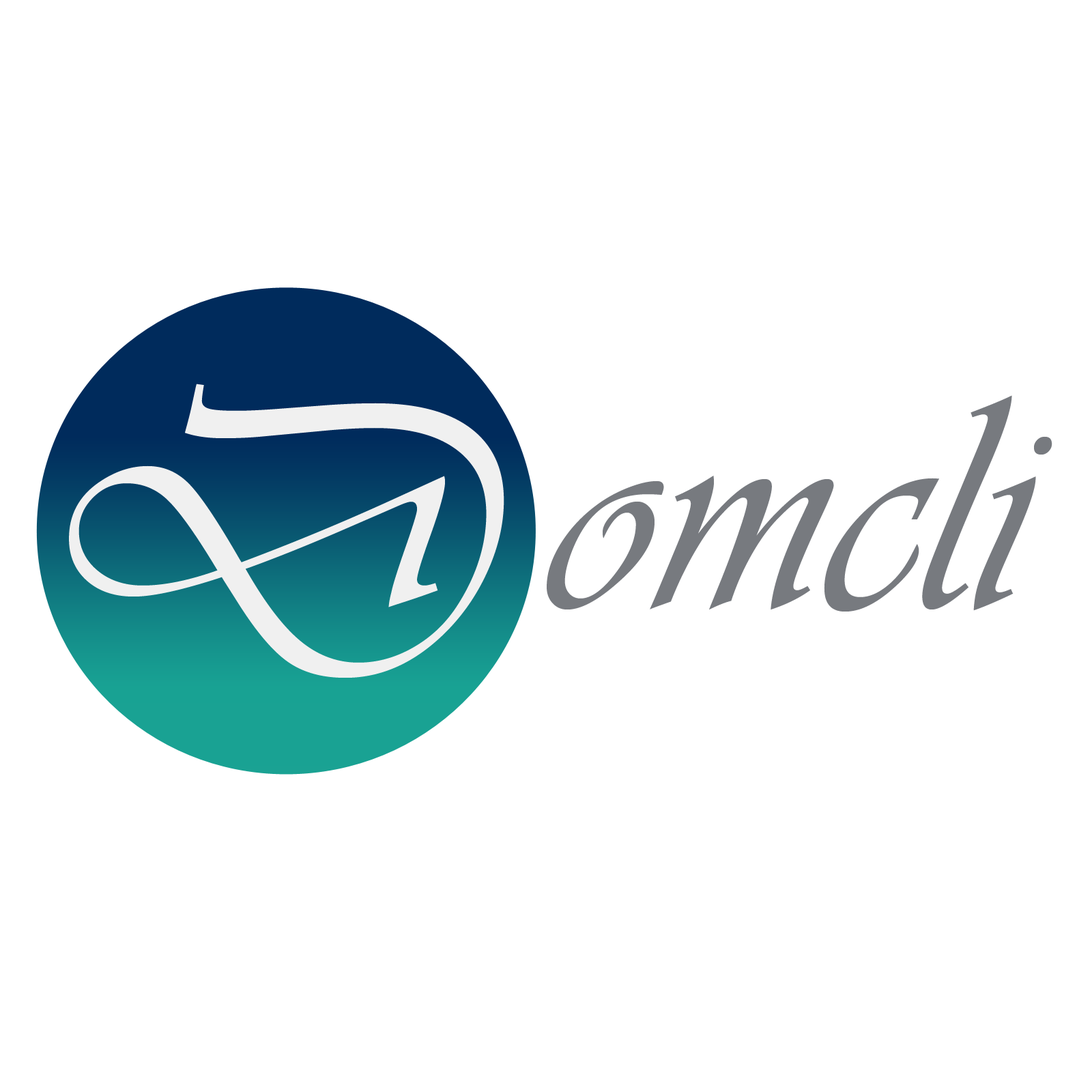
<style>
.page{position:relative;width:1092px;height:1092px;background:#ffffff}
.page>*{position:absolute;margin:0}
.t1{font:409.5px "Vivaldii";color:#f0f0f0}
.t2{font:318.5px "Vivaldii";color:#777a7f}
</style>
<div class="page">
<p class="t1" style="left:69px;top:384px;width:435px;height:294px">D</p>
<p class="t2" style="left:547px;top:395px;width:505px;height:217px">omcli</p>
</div>
